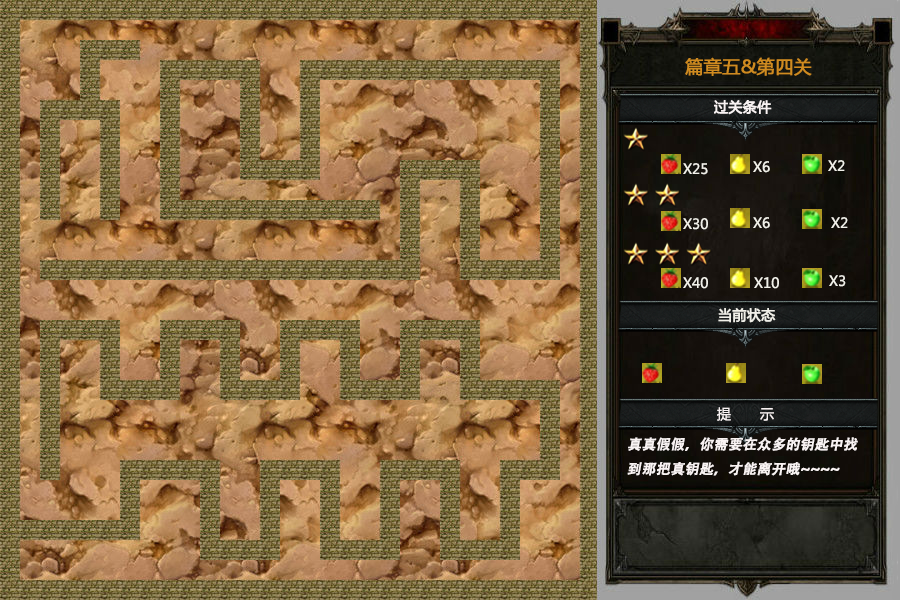
<style>
.page{position:relative;width:900px;height:600px}
.page>*{position:absolute;margin:0}
.t1{font:18px "MicrosoftYaHei";color:#cf8b20;font-weight:bold}
.t2{font:14px "MicrosoftYaHei";color:#f9f3f3;font-weight:bold}
.t3{font:14px "MicrosoftYaHei";color:#f1f0e9}
.t4{font:14px "MicrosoftYaHei";color:#f1f0e9;font-weight:bold}
.t5{font:14px "MicrosoftYaHei";color:#f9f3f3}
.t6{font:14px "AdobeHeitiStd-Regular";color:#f9f3f3;font-weight:bold;font-style:italic}
</style>
<div class="page">
<p class="t1" style="left:685px;top:57px;width:127px;height:19px">篇章五&amp;第四关</p>
<p class="t2" style="left:714px;top:100px;width:58px;height:15px">过关条件</p>
<p class="t3" style="left:753px;top:161px;width:17px;height:12px">X6</p>
<p class="t3" style="left:828px;top:160px;width:17px;height:11px">X2</p>
<p class="t3" style="left:683px;top:163px;width:25px;height:12px">X25</p>
<p class="t3" style="left:683px;top:218px;width:25px;height:12px">X30</p>
<p class="t3" style="left:753px;top:217px;width:17px;height:12px">X6</p>
<p class="t3" style="left:831px;top:217px;width:17px;height:11px">X2</p>
<p class="t3" style="left:683px;top:277px;width:25px;height:12px">X40</p>
<p class="t3" style="left:754px;top:277px;width:25px;height:12px">X10</p>
<p class="t3" style="left:829px;top:275px;width:17px;height:12px">X3</p>
<p class="t4" style="left:718px;top:308px;width:58px;height:15px">当前状态</p>
<p class="t5" style="left:717px;top:407px;width:57px;height:14px">提       示</p>
<p class="t6" style="left:627px;top:437px;width:231px;height:39px">真真假假，你需要在众多的钥匙中找到那把真钥匙，才能离开哦~~~~</p>
</div>
